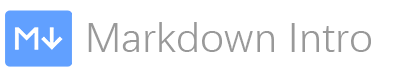
<style>
.page{position:relative;width:400px;height:77px;background:#ffffff}
.page>*{position:absolute;margin:0}
.t1{font:42px "DengXian";color:#999999}
</style>
<div class="page">
<p class="t1" style="left:88px;top:22px;width:283px;height:30px">Markdown Intro</p>
</div>
